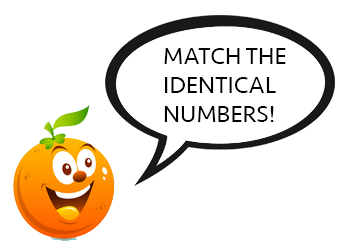
<style>
.page{position:relative;width:346px;height:242px;background:#ffffff}
.page>*{position:absolute;margin:0}
.t1{font:24px "Seravek";color:#000000}
</style>
<div class="page">
<p class="t1" style="left:164px;top:48px;width:122px;height:74px">MATCH THE <br>IDENTICAL <br>NUMBERS!</p>
</div>
